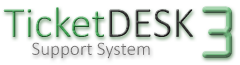
<style>
.page{position:relative;width:240px;height:65px;background:#ffffff}
.page>*{position:absolute;margin:0}
.t1{font:66px "OCRAStd";letter-spacing:-0.225em;color:#40a453;scale:0.91 1}
.t2{font:43.3px "Calibri-Light";color:#40a453}
.t3{font:43.3px "Calibri-Light";color:#302f2f}
</style>
<div class="page">
<p class="t1" style="left:202px;top:6px;width:30px;height:52px;opacity:0.85">3</p>
<p class="t2" style="left:3px;top:7px;width:190px;height:30px">Ticket<span class="t3">DESK</span></p>
</div>
